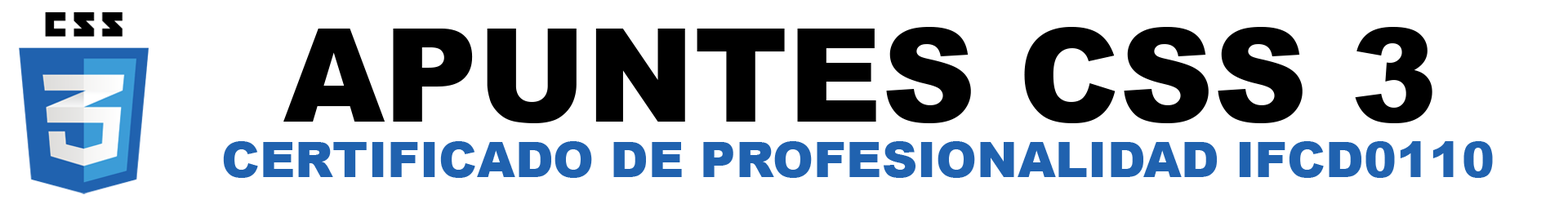
<style>
.page{position:relative;width:1568px;height:204px;background:#ffffff}
.page>*{position:absolute;margin:0}
.t1{font:129.8px "Arial-Black";color:#000000}
.t2{font:49px "Arial-Black";color:#2062af}
</style>
<div class="page">
<p class="t1" style="left:283px;top:27px;width:1149px;height:96px">APUNTES CSS 3</p>
<p class="t2" style="left:223px;top:141px;width:1270px;height:37px">CERTIFICADO DE PROFESIONALIDAD IFCD0110</p>
</div>
